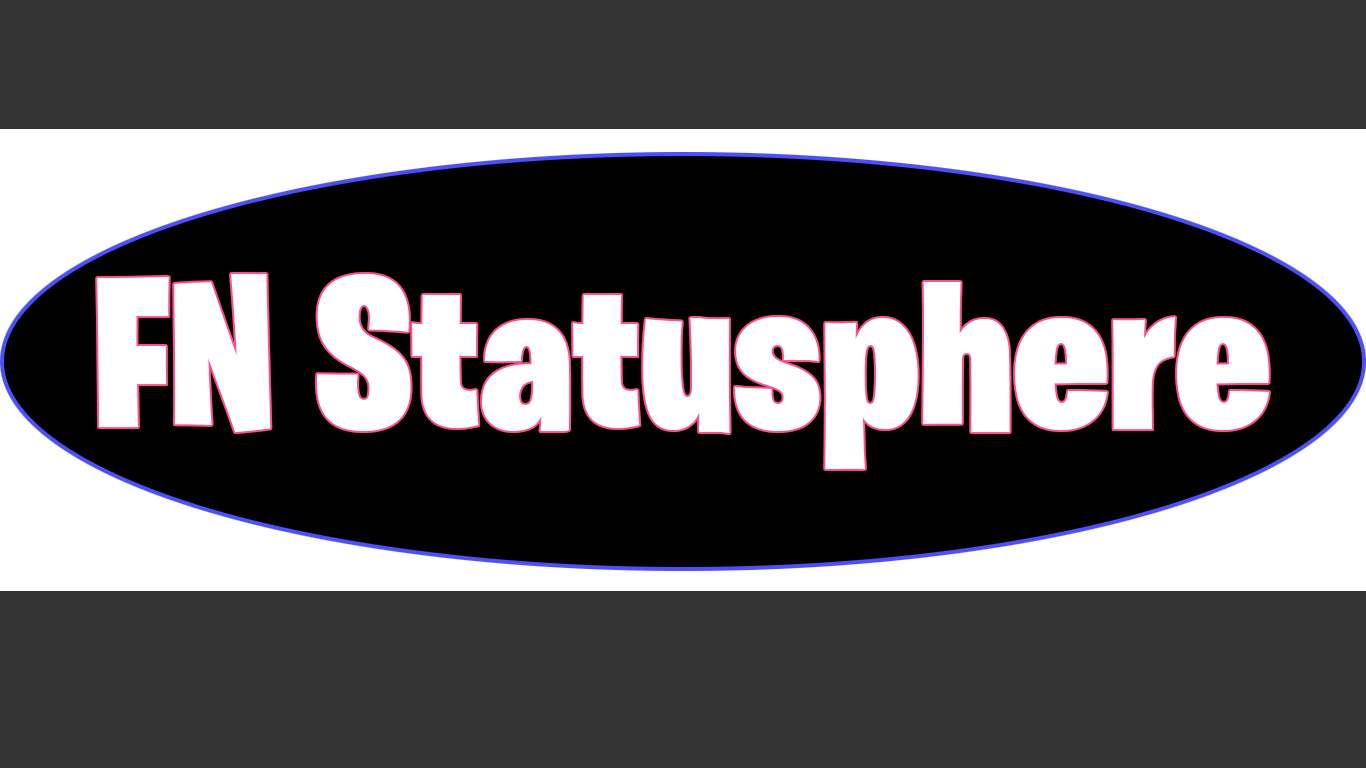
<style>
.page{position:relative;width:1366px;height:768px;background:#333333}
.page>*{position:absolute;margin:0}
.t1{font:216px "BurbankBigCondensed-Black";color:#ffffff}
</style>
<div class="page">
<p class="t1" style="left:97px;top:274px;width:1172px;height:195px">FN Statusphere</p>
</div>
